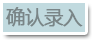
<style>
.page{position:relative;width:92px;height:40px;background:#c1dadf}
.page>*{position:absolute;margin:0}
.t1{font:18.7px "MicrosoftYaHei";color:#7a8587;font-weight:bold}
</style>
<div class="page">
<p class="t1" style="left:6px;top:7px;width:77px;height:20px">确认录入</p>
</div>
